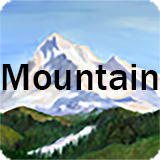
<style>
.page{position:relative;width:160px;height:160px}
.page>*{position:absolute;margin:0}
.t1{font:39.4px "FranklinGothic-Medium";color:#000000}
</style>
<div class="page">
<p class="t1" style="left:2px;top:64px;width:156px;height:26px">Mountain</p>
</div>
